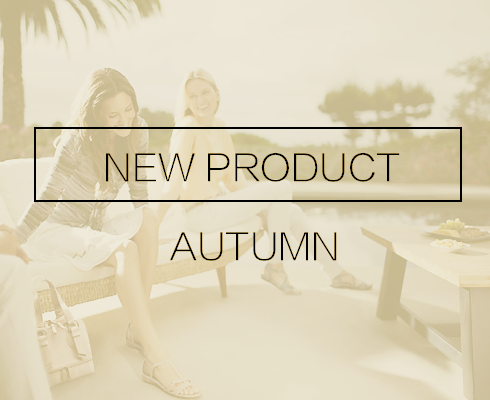
<style>
.page{position:relative;width:490px;height:400px}
.page>*{position:absolute;margin:0}
.t1{font:36px "FZLTXHK--GBK1-0";color:#000000;text-transform:uppercase}
</style>
<div class="page">
<p class="t1" style="left:106px;top:152px;width:294px;height:30px">new product</p>
<p class="t1" style="left:170px;top:232px;width:167px;height:29px">autumn</p>
</div>
